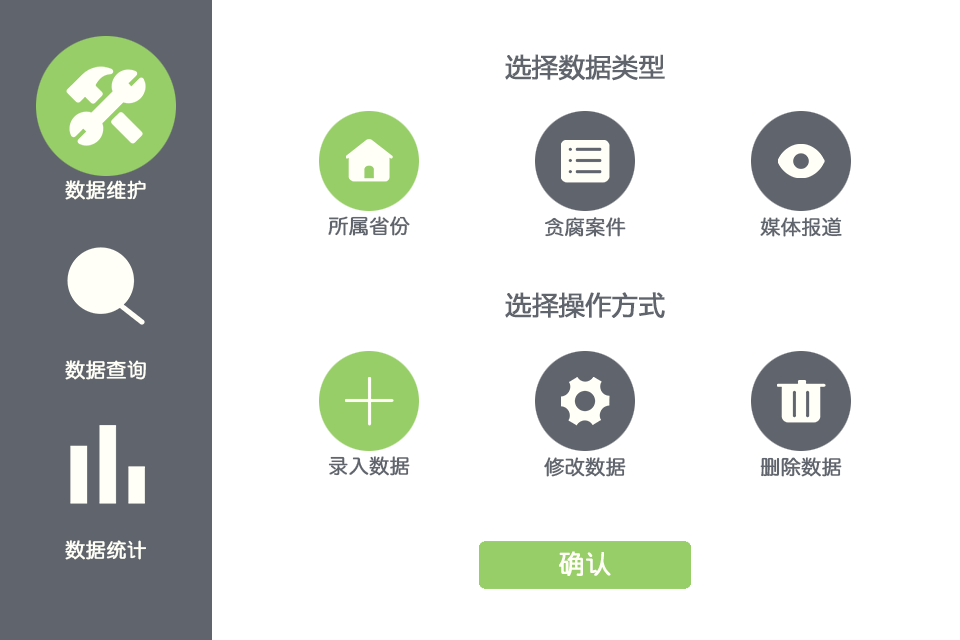
<style>
.page{position:relative;width:960px;height:640px;background:#ffffff}
.page>*{position:absolute;margin:0}
.t1{font:26px "MicrosoftYaHei";color:#60646d;font-weight:bold}
.t2{font:20px "QingYuanMono";color:#fffff7;font-weight:bold}
.t3{font:20.1px "QingYuanMono";color:#60646d;font-weight:bold}
.t4{font:20px "QingYuanMono";color:#60646d;font-weight:bold}
.t5{font:26px "QingYuanMono";color:#fffff7;font-weight:bold}
</style>
<div class="page">
<p class="t1" style="left:505px;top:54px;width:160px;height:27px">选择数据类型</p>
<p class="t2" style="left:65px;top:180px;width:81px;height:20px">数据维护</p>
<p class="t3" style="left:328px;top:216px;width:82px;height:20px">所属省份</p>
<p class="t4" style="left:545px;top:217px;width:81px;height:20px">贪腐案件</p>
<p class="t3" style="left:760px;top:217px;width:82px;height:20px">媒体报道</p>
<p class="t1" style="left:505px;top:292px;width:160px;height:26px">选择操作方式</p>
<p class="t2" style="left:65px;top:360px;width:81px;height:20px">数据查询</p>
<p class="t3" style="left:328px;top:456px;width:82px;height:20px">录入数据</p>
<p class="t3" style="left:544px;top:457px;width:82px;height:20px">修改数据</p>
<p class="t3" style="left:760px;top:457px;width:82px;height:20px">删除数据</p>
<p class="t2" style="left:65px;top:540px;width:81px;height:20px">数据统计</p>
<p class="t5" style="left:559px;top:551px;width:52px;height:25px">确认</p>
</div>
